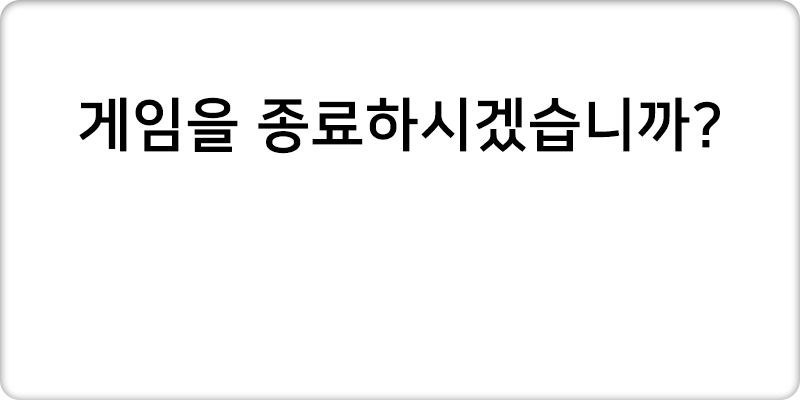
<style>
.page{position:relative;width:800px;height:400px;background:#ffffff}
.page>*{position:absolute;margin:0}
.t1{font:58px "NanumSquareB";color:#000000;font-weight:bold}
</style>
<div class="page">
<p class="t1" style="left:79px;top:97px;width:641px;height:57px">게임을 종료하시겠습니까?</p>
</div>
